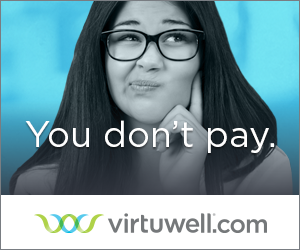
<style>
.page{position:relative;width:300px;height:250px}
.page>*{position:absolute;margin:0}
.t1{font:36px "Gotham-Book";color:#ffffff}
</style>
<div class="page">
<p class="t1" style="left:25px;top:120px;width:249px;height:33px">You don’t pay.</p>
</div>
